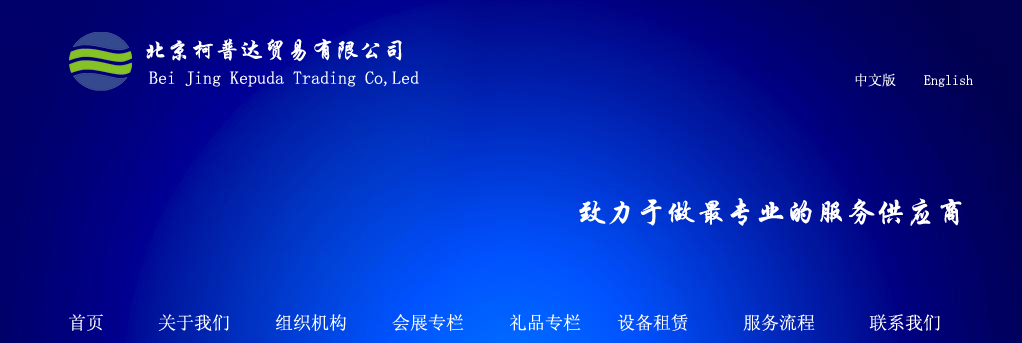
<style>
.page{position:relative;width:1022px;height:343px}
.page>*{position:absolute;margin:0}
.t1{font:24px "STXingkai";color:#ffffff}
.t2{font:18px "SimSun";color:#ffffff}
.t3{font:14px "SimSun";color:#ffffff}
.t4{font:30px "STXingkai";color:#ffffff}
</style>
<div class="page">
<p class="t1" style="left:146px;top:38px;width:256px;height:24px">北京柯普达贸易有限公司</p>
<p class="t2" style="left:149px;top:71px;width:270px;height:16px">Bei Jing Kepuda Trading Co,Led</p>
<p class="t3" style="left:855px;top:73px;width:118px;height:14px"><span class="t2">                                               </span>中文版    English</p>
<p class="t4" style="left:579px;top:198px;width:383px;height:28px">致力于做最专业的服务供应商</p>
<p class="t2" style="left:69px;top:314px;width:871px;height:17px">首页      关于我们     组织机构     会展专栏     礼品专栏    设备租赁      服务流程      联系我们</p>
</div>
